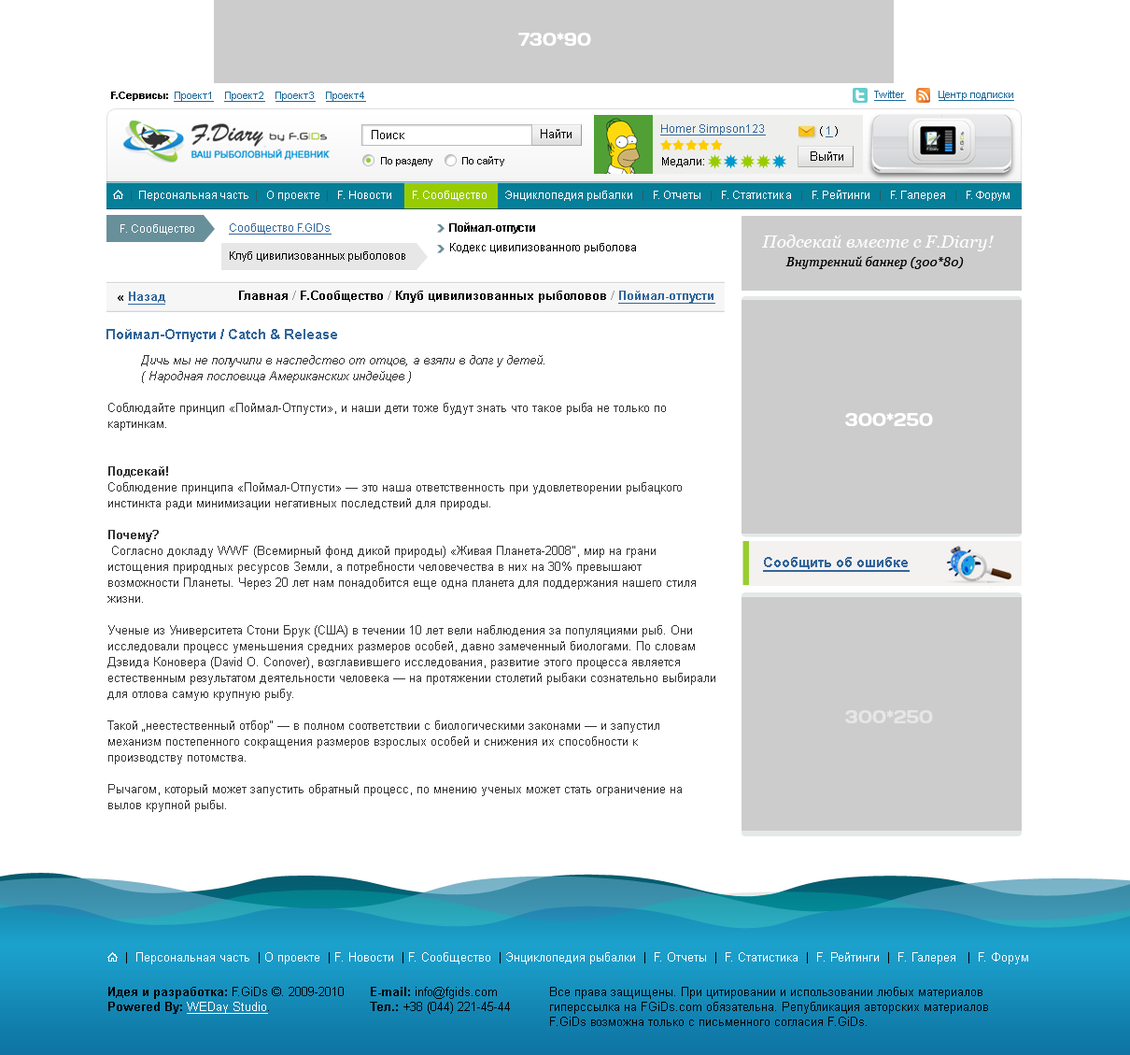
<style>
.page{position:relative;width:1130px;height:1055px;background:#ffffff}
.page>*{position:absolute;margin:0}
.t1{font:17.8px "Days";color:#ffffff}
.t2{font:10.3px "ArialMT";color:#1c699a;text-decoration:underline}
.t3{font:10.3px "Arial-BoldMT";color:#000000}
.t4{font:11.2px "ArialMT";color:#336699;text-decoration:underline}
.t5{font:12.1px "ArialMT";color:#000000}
.t6{font:11.2px "ArialMT";color:#000000}
.t7{font:10.3px "ArialMT";color:#000000}
.t8{font:11.2px "ArialMT";color:#ffffff}
.t9{font:11.2px "ArialMT";color:#2d5a63}
.t10{font:11.2px/28px "ArialMT";color:#000000}
.t11{font:11.2px/28px "ArialMT";color:#336699;text-decoration:underline}
.t12{font:11.2px/19.6px "ArialMT";color:#000000}
.t13{font:11.2px/19.6px "Arial-BoldMT";color:#000000}
.t14{font:17.7px "Georgia-Italic";color:#fefefe}
.t15{font:12.6px/18.5px "Georgia-Italic";color:#000000}
.t16{font:12.1px "Arial-BoldMT";color:#336699;text-decoration:underline}
.t17{font:12.1px "Arial-BoldMT";color:#000000}
.t18{font:12.1px "Arial-BoldMT";color:#999999}
.t19{font:14px "Arial-BoldMT";color:#336699}
.t20{font:12.1px/15.9px "ArialMT";color:#333333}
.t21{font:12.1px/15.9px "Arial-ItalicMT";color:#333333}
.t22{font:12.1px/15.9px "Arial-BoldMT";color:#333333}
.t23{font:14px "Arial-BoldMT";color:#336699;text-decoration:underline}
.t24{font:17.8px "Days";color:#e6e6e6}
.t25{font:12.1px "ArialMT";color:#ffffff}
.t26{font:12.1px "ArialMT";color:#ffffff;text-decoration:underline}
</style>
<div class="page">
<p class="t1" style="left:519px;top:33px;width:72px;height:13px">730*90</p>
<p class="t2" style="left:111px;top:92px;width:255px;height:10px"><span class="t3">F.Сервисы:  </span>Проект1    Проект2    Проект3    Проект4</p>
<p class="t2" style="left:874px;top:91px;width:32px;height:10px">Twitter</p>
<p class="t2" style="left:939px;top:91px;width:76px;height:10px">Центр подписки</p>
<p class="t4" style="left:661px;top:124px;width:105px;height:11px">Homer Simpson123</p>
<p class="t5" style="left:372px;top:130px;width:33px;height:9px">Поиск</p>
<p class="t5" style="left:541px;top:129px;width:31px;height:9px">Найти</p>
<p class="t6" style="left:820px;top:126px;width:18px;height:11px">( <span class="t4">1</span> )</p>
<p class="t7" style="left:381px;top:157px;width:52px;height:9px">По разделу</p>
<p class="t7" style="left:462px;top:156px;width:43px;height:10px">По сайту</p>
<p class="t6" style="left:662px;top:157px;width:42px;height:10px">Медали:</p>
<p class="t5" style="left:811px;top:151px;width:33px;height:10px">Выйти</p>
<p class="t8" style="left:131px;top:190px;width:879px;height:11px"><span class="t9">|</span>  Персональная часть  <span class="t9">| </span>  О проекте  <span class="t9">|</span>   F. Новости       F. Сообщество      Энциклопедия рыбалки  <span class="t9"> |</span>   F. Отчеты   <span class="t9">|</span>   F. Статистика   <span class="t9">|</span>   F. Рейтинги   <span class="t9">| </span>  F. Галерея   <span class="t9">|</span>   F. Форум</p>
<p class="t8" style="left:121px;top:224px;width:73px;height:11px">F. Сообщество</p>
<p class="t10" style="left:229px;top:223px;width:176px;height:39px"><span class="t11">Сообщество F.GIDs<br></span>Клуб цивилизованных рыболовов</p>
<p class="t12" style="left:449px;top:222px;width:187px;height:31px"><span class="t13">Поймал-отпусти<br></span>Кодекс цивилизованного рыболова</p>
<p class="t14" style="left:762px;top:235px;width:232px;height:34px;text-align:center">Подсекай вместе с F.Diary!<br><span class="t15">Внутренний баннер (300*80)</span></p>
<p class="t16" style="left:118px;top:291px;width:47px;height:14px"><span class="t17"> « </span>Назад</p>
<p class="t17" style="left:239px;top:291px;width:477px;height:13px">Главная <span class="t18">/ </span>F.Сообщество <span class="t18">/ </span>Клуб цивилизованных рыболовов <span class="t18">/ </span><span class="t16">Поймал-отпусти</span></p>
<p class="t19" style="left:107px;top:329px;width:230px;height:13px">Поймал-Отпусти / Catch &amp; Release</p>
<p class="t20" style="left:107px;top:355px;width:609px;height:457px"><span class="t21"> Дичь мы не получили в наследство от отцов, а взяли в долг у детей.<br> ( Народная пословица Американских индейцев )<br></span> <br>Соблюдайте принцип «Поймал-Отпусти», и наши дети тоже будут знать что такое рыба не только по картинкам.<br> <br>  <br><span class="t22">Подсекай!<br></span>Соблюдение принципа «Поймал-Отпусти» — это наша ответственность при удовлетворении рыбацкого инстинкта ради минимизации негативных последствий для природы.<br> <br><span class="t22">Почему?<br></span> Согласно докладу WWF (Всемирный фонд дикой природы) «Живая Планета-2008″, мир на грани истощения природных ресурсов Земли, а потребности человечества в них на 30% превышают возможности Планеты. Через 20 лет нам понадобится еще одна планета для поддержания нашего стиля жизни.<br><br>Ученые из Университета Стони Брук (США) в течении 10 лет вели наблюдения за популяциями рыб. Они исследовали процесс уменьшения средних размеров особей, давно замеченный биологами. По словам Дэвида Коновера (David O. Conover), возглавившего исследования, развитие этого процесса является естественным результатом деятельности человека — на протяжении столетий рыбаки сознательно выбирали для отлова самую крупную рыбу.<br><br>Такой „неестественный отбор“ — в полном соответствии с биологическими законами — и запустил механизм постепенного сокращения размеров взрослых особей и снижения их способности к производству потомства.<br><br>Рычагом, который может запустить обратный процесс, по мнению ученых может стать ограничение на вылов крупной рыбы.</p>
<p class="t1" style="left:846px;top:413px;width:87px;height:13px">300*250</p>
<p class="t23" style="left:763px;top:557px;width:147px;height:15px">Сообщить об ошибке</p>
<p class="t24" style="left:846px;top:710px;width:87px;height:13px">300*250</p>
<p class="t25" style="left:126px;top:952px;width:903px;height:12px"><span class="t5">|</span>  Персональная часть <span class="t5"> |</span> О проекте  <span class="t5">|</span> F. Новости  <span class="t5">|</span> F. Сообщество  <span class="t5">|</span> Энциклопедия рыбалки  <span class="t5">|</span>  F. Отчеты  <span class="t5">|</span>  F. Статистика  <span class="t5">|</span>  F. Рейтинги  <span class="t5">|</span>  F. Галерея   <span class="t5">|</span>  F. Форум</p>
<p class="t5" style="left:108px;top:987px;width:236px;height:27px"><span class="t17">Идея и разработка:</span> F.GiDs ©. 2009-2010<br><span class="t17">Powered By: </span><span class="t26">WEDay Studio</span>.</p>
<p class="t5" style="left:370px;top:987px;width:140px;height:27px"><span class="t17">E-mail: </span>info@fgids.com<br><span class="t17">Тел.:</span> +38 (044) 221-45-44</p>
<p class="t5" style="left:550px;top:987px;width:438px;height:39px">Все права защищены. При цитировании и использовании любых материалов гиперссылка на FGiDs.com обязательна. Републикация авторских материалов F.GiDs возможна только с письменного согласия F.GiDs.</p>
</div>
